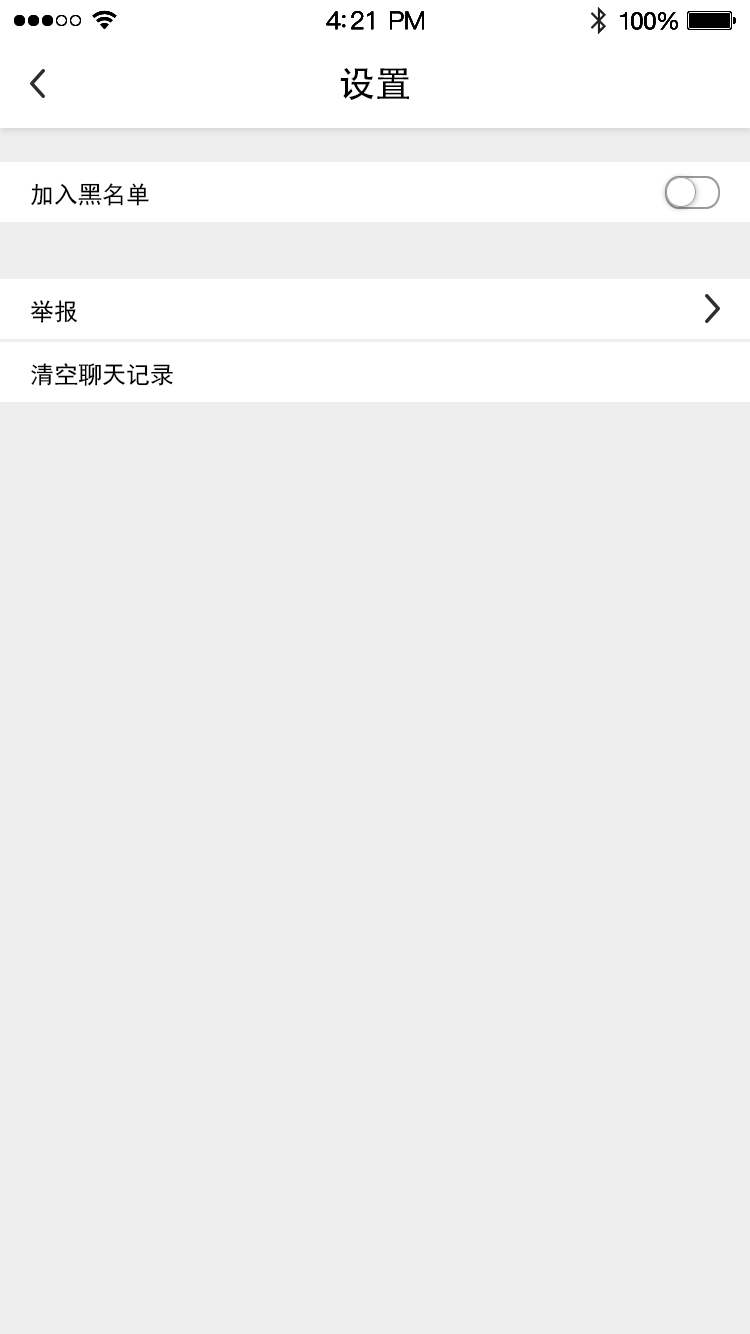
<style>
.page{position:relative;width:750px;height:1334px;background:#eeeeee}
.page>*{position:absolute;margin:0}
.t1{font:36px "AdobeHeitiStd-Regular";color:#000000}
.t2{font:24px "SimHei";color:#000000}
</style>
<div class="page">
<p class="t1" style="left:340px;top:68px;width:69px;height:32px">设置</p>
<p class="t2" style="left:31px;top:183px;width:118px;height:23px">加入黑名单</p>
<p class="t2" style="left:30px;top:300px;width:48px;height:23px">举报</p>
<p class="t2" style="left:31px;top:363px;width:142px;height:23px">清空聊天记录</p>
</div>
